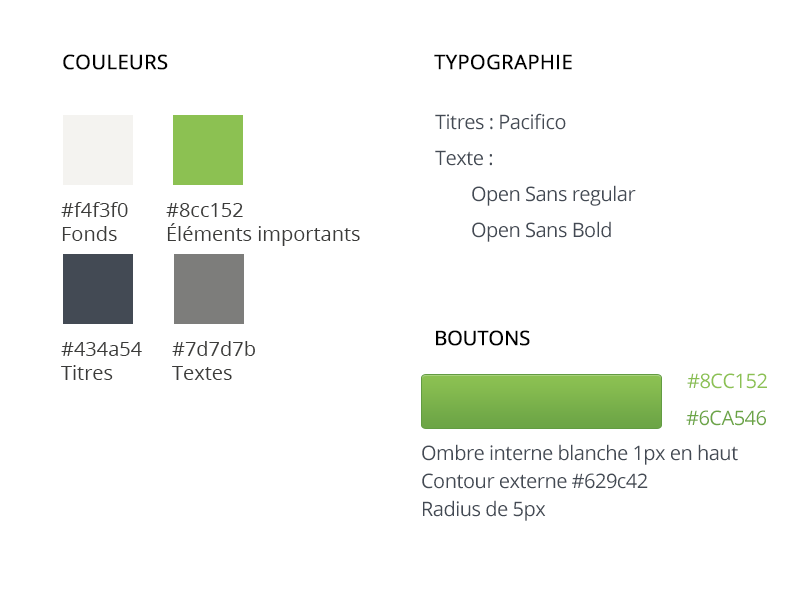
<style>
.page{position:relative;width:800px;height:600px;background:#ffffff}
.page>*{position:absolute;margin:0}
.t1{font:20px "OpenSans";color:#000000;text-transform:uppercase;font-weight:bold}
.t2{font:20px/36px "OpenSans";letter-spacing:-0.025em;color:#434a54}
.t3{font:20px "OpenSans";color:#3c3c3a}
.t4{font:20px "OpenSans";letter-spacing:-0.025em;color:#000000;text-transform:uppercase;font-weight:bold}
.t5{font:20px "OpenSans";letter-spacing:-0.025em;color:#8cc152;text-transform:uppercase}
.t6{font:20px "OpenSans";letter-spacing:-0.025em;color:#89be51;text-transform:uppercase}
.t7{font:20px "OpenSans";letter-spacing:-0.025em;color:#6ca546;text-transform:uppercase}
.t8{font:20px "OpenSans";letter-spacing:-0.025em;color:#434a54}
</style>
<div class="page">
<p class="t1" style="left:63px;top:54px;width:105px;height:16px">Couleurs</p>
<p class="t1" style="left:434px;top:54px;width:138px;height:16px">Typographie</p>
<p class="t2" style="left:435px;top:113px;width:201px;height:129px">Titres : Pacifico<br>Texte :<br> Open Sans regular<br> Open Sans Bold</p>
<p class="t3" style="left:61px;top:202px;width:67px;height:39px;text-align:justify">#f4f3f0<br>Fonds</p>
<p class="t3" style="left:166px;top:203px;width:194px;height:43px;text-align:justify">#8cc152<br>Éléments importants</p>
<p class="t3" style="left:61px;top:342px;width:81px;height:38px;text-align:justify">#434a54<br>Titres</p>
<p class="t3" style="left:172px;top:341px;width:83px;height:39px;text-align:justify">#7d7d7b<br>Textes</p>
<p class="t4" style="left:436px;top:330px;width:94px;height:16px">BOUTONS</p>
<p class="t5" style="left:687px;top:373px;width:80px;height:16px"><span class="t6">#</span>8cc152</p>
<p class="t7" style="left:686px;top:410px;width:80px;height:16px">#6ca546</p>
<p class="t8" style="left:422px;top:444px;width:316px;height:21px">Ombre interne blanche 1px en haut</p>
<p class="t8" style="left:422px;top:473px;width:226px;height:16px">Contour externe #629c42</p>
<p class="t8" style="left:423px;top:500px;width:123px;height:21px">Radius de 5px</p>
</div>
